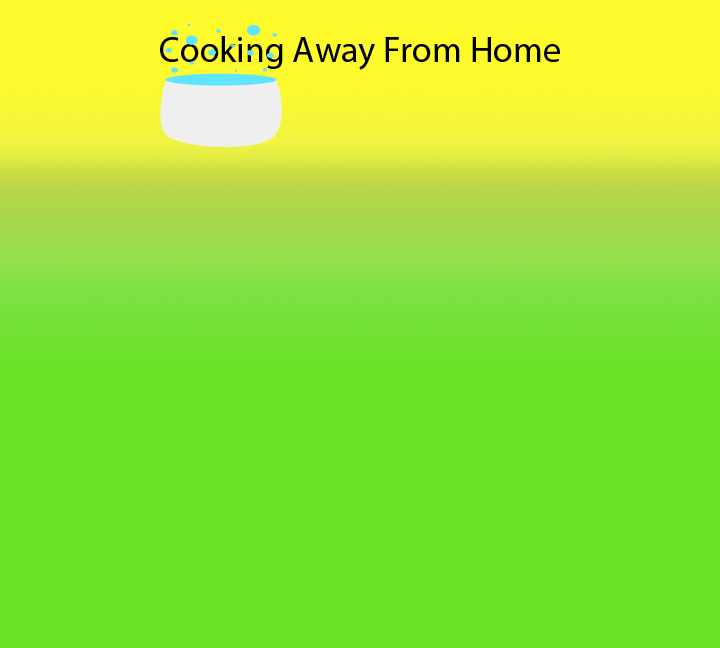
<style>
.page{position:relative;width:720px;height:648px;background:#68e227}
.page>*{position:absolute;margin:0}
.t1{font:36px "MyriadPro-Regular";color:#000000}
</style>
<div class="page">
<p class="t1" style="left:160px;top:36px;width:400px;height:34px">Cooking Away From Home</p>
</div>
